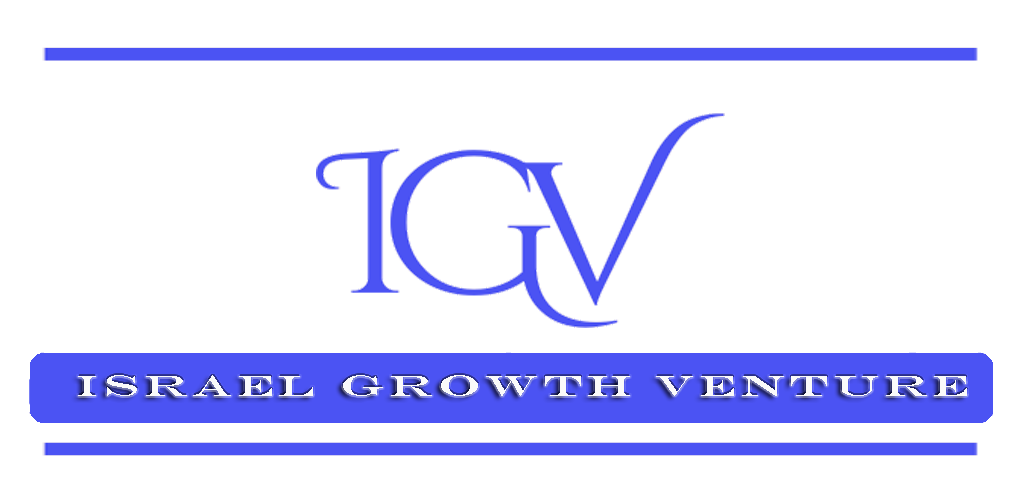
<style>
.page{position:relative;width:1022px;height:500px;background:#ffffff}
.page>*{position:absolute;margin:0}
.t1{font:30px "EngraversMT";letter-spacing:0.1em;color:#ffffff;scale:1.5 1}
</style>
<div class="page">
<p class="t1" style="left:78px;top:375px;width:889px;height:21px">Israel Growth Venture</p>
</div>
